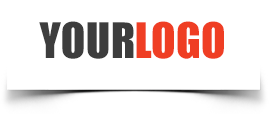
<style>
.page{position:relative;width:269px;height:114px;background:#ffffff}
.page>*{position:absolute;margin:0}
.t1{font:45.1px "Impact";color:#3d3d3d;text-transform:uppercase}
.t2{font:45.1px "Impact";color:#ef3e24;text-transform:uppercase}
</style>
<div class="page">
<p class="t1" style="left:39px;top:21px;width:185px;height:38px">YOUR<span class="t2">LOGO</span></p>
</div>
